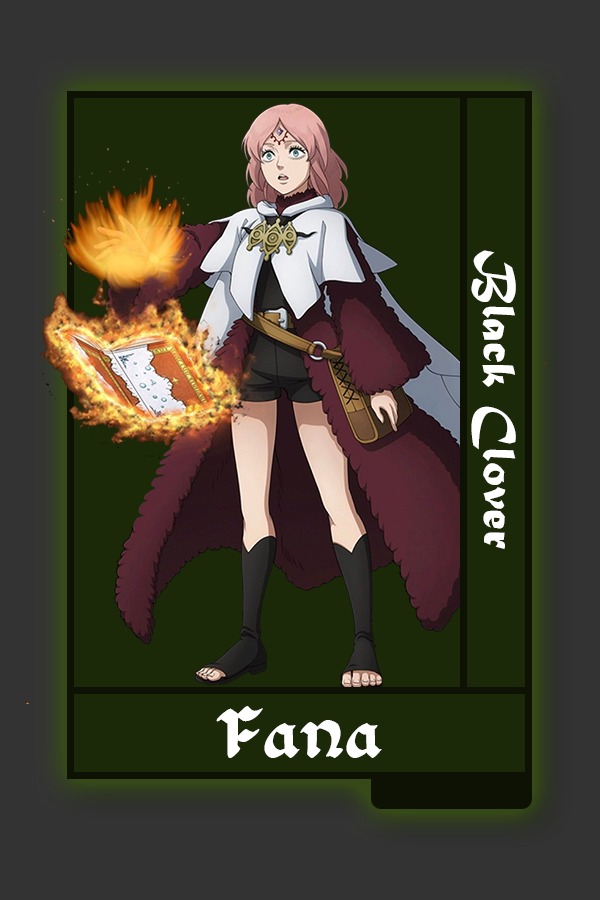
<style>
.page{position:relative;width:600px;height:900px;background:#1b2908}
.page>*{position:absolute;margin:0}
.t1{font:48.8px "MaturaMTScriptCapitals";color:#ffffff}
.t2{font:59.7px "FloranteatLaura";color:#ffffff}
</style>
<div class="page">
<p class="t1" style="left:471px;top:250px;width:45px;height:299px;rotate:90deg">Black Clover</p>
<p class="t2" style="left:216px;top:706px;width:166px;height:52px">Fana</p>
</div>
